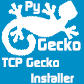
<style>
.page{position:relative;width:84px;height:84px;background:#0090c8}
.page>*{position:absolute;margin:0}
.t1{font:14px "ContinuumBold";color:#fefefe}
.t2{font:17px "ContinuumBold";color:#fefefe}
.t3{font:13px "ContinuumBold";color:#fefefe}
</style>
<div class="page">
<p class="t1" style="left:25px;top:1px;width:15px;height:13px">Py</p>
<p class="t2" style="left:38px;top:38px;width:43px;height:13px">Gecko</p>
<p class="t3" style="left:2px;top:57px;width:72px;height:26px;text-align:center">TCP Gecko<br>Installer</p>
</div>
